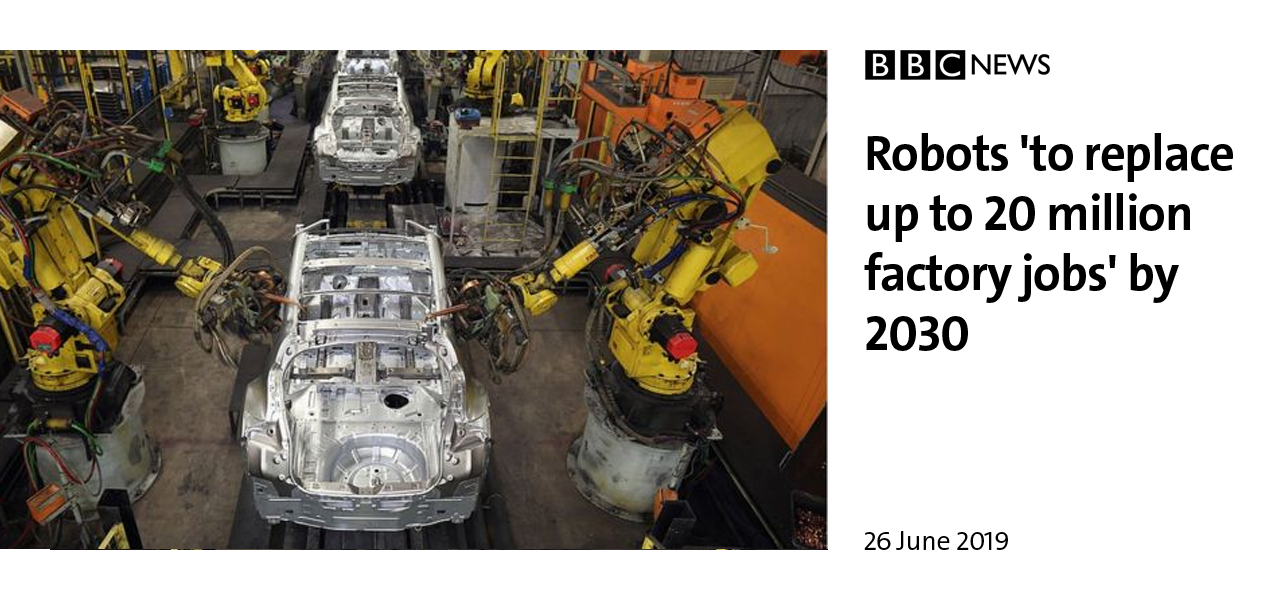
<style>
.page{position:relative;width:1267px;height:600px;background:#ffffff}
.page>*{position:absolute;margin:0}
.t1{font:50.2px "V&ATheSansC6s-Bold";letter-spacing:-0.02em;color:#000000}
.t2{font:27.7px "V&ATheSansC6s-SemiLight";letter-spacing:-0.02em;color:#000000}
</style>
<div class="page">
<p class="t1" style="left:864px;top:133px;width:369px;height:218px">Robots 'to replace<br>up to 20 million<br>factory jobs' by<br>2030</p>
<p class="t2" style="left:864px;top:531px;width:144px;height:19px">26 June 2019</p>
</div>
